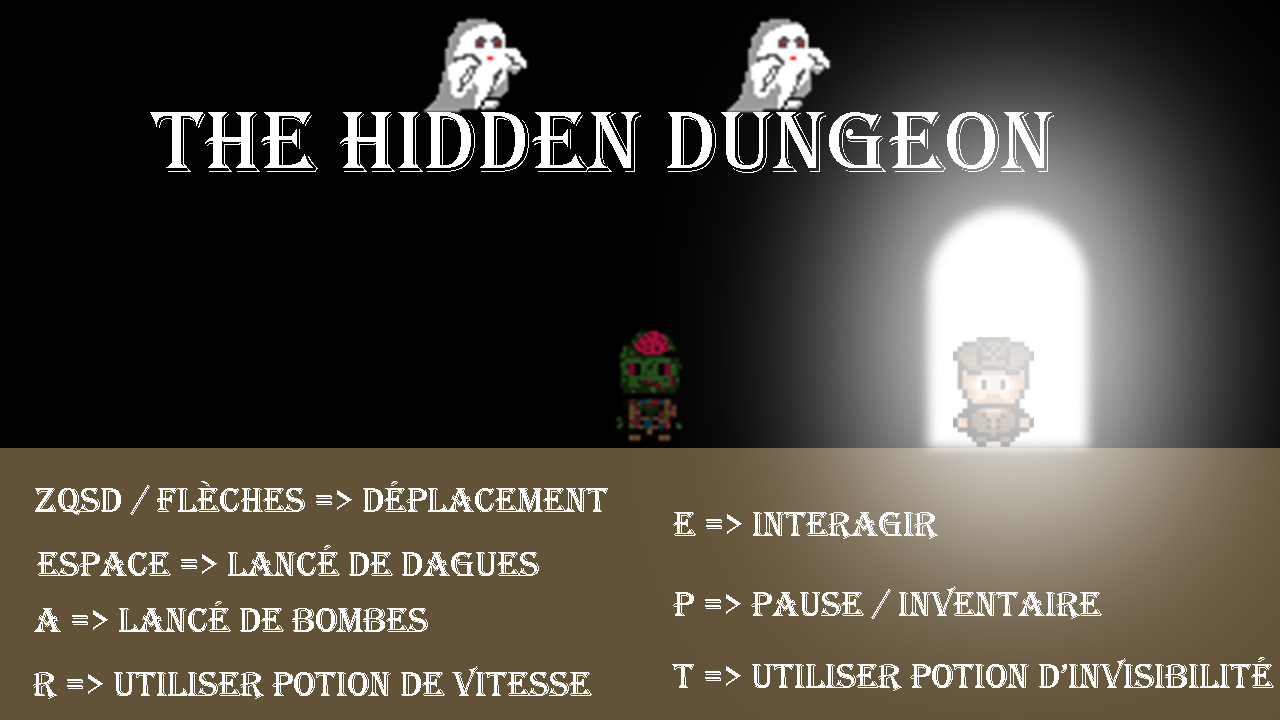
<style>
.page{position:relative;width:1280px;height:720px;background:#000000}
.page>*{position:absolute;margin:0}
.t1{font:36px "Algerian";color:#ffffff}
</style>
<div class="page">
<p class="t1" style="left:35px;top:481px;width:573px;height:34px">ZQSD / flèches =&gt; Déplacement</p>
<p class="t1" style="left:673px;top:512px;width:265px;height:27px">e =&gt; interagir</p>
<p class="t1" style="left:37px;top:545px;width:502px;height:31px">ESPACE =&gt; lancé de dagues</p>
<p class="t1" style="left:673px;top:586px;width:429px;height:33px">P =&gt; Pause / inventaire</p>
<p class="t1" style="left:34px;top:601px;width:394px;height:31px">A =&gt; Lancé de bombes</p>
<p class="t1" style="left:672px;top:657px;width:602px;height:34px">t =&gt; utiliser potion d’invisibilité</p>
<p class="t1" style="left:33px;top:666px;width:559px;height:33px">R =&gt; utiliser potion de vitesse</p>
</div>
